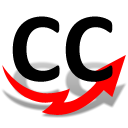
<style>
.page{position:relative;width:128px;height:128px;background:#ffffff}
.page>*{position:absolute;margin:0}
.t1{font:100px "Calibri-Bold";color:#000000}
</style>
<div class="page">
<p class="t1" style="left:12px;top:16px;width:101px;height:66px">CC</p>
</div>
